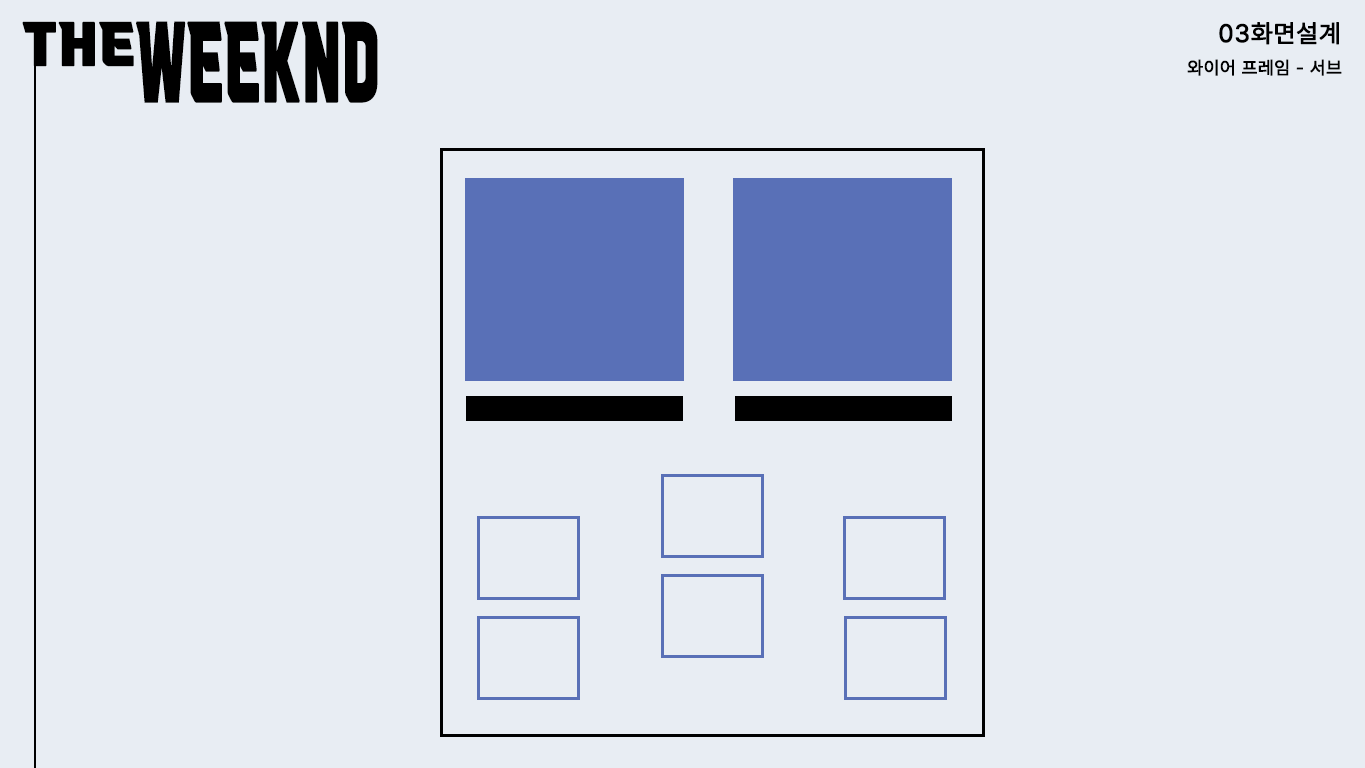
<style>
.page{position:relative;width:1365px;height:768px;background:#e8edf3}
.page>*{position:absolute;margin:0}
.t1{font:50px "VITRO-CORE-TTF";letter-spacing:0.03em;color:#000000;font-weight:bold}
.t2{font:91.5px "VITRO-CORE-TTF";letter-spacing:0.03em;color:#000000;font-weight:bold;scale:0.55 1}
.t3{font:25px "Pretendard-Regular";letter-spacing:0.03em;color:#000000;font-weight:bold}
.t4{font:18px "Pretendard-Regular";letter-spacing:0.03em;color:#000000;font-weight:bold}
</style>
<div class="page">
<p class="t1" style="left:22px;top:21px;width:112px;height:46px">THE</p>
<p class="t2" style="left:136px;top:21px;width:242px;height:82px">WEEKND</p>
<p class="t3" style="left:1219px;top:22px;width:120px;height:23px">03화면설계</p>
<p class="t4" style="left:1187px;top:59px;width:155px;height:17px">와이어 프레임 - 서브</p>
</div>
